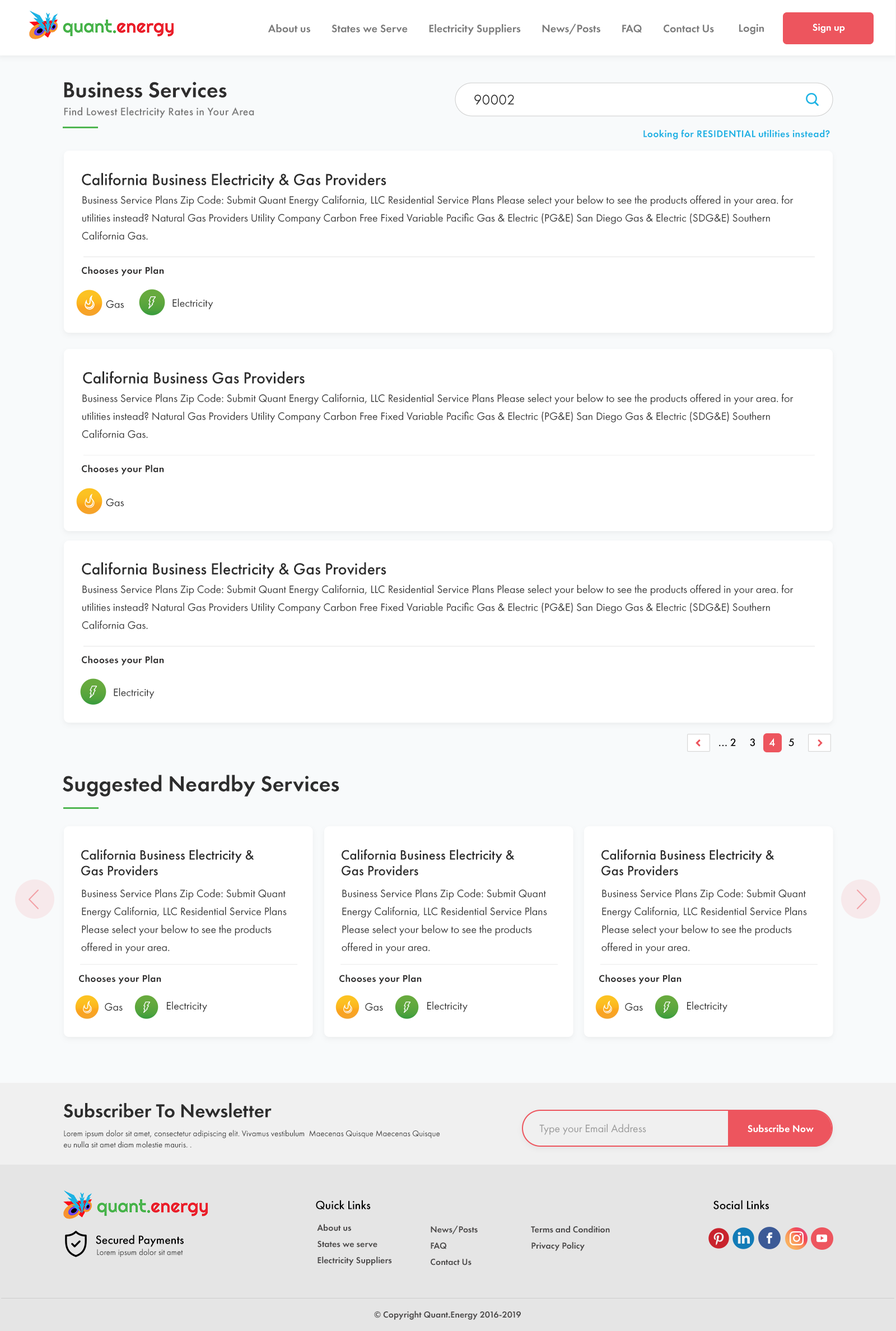
<style>
.page{position:relative;width:896px;height:1331px;background:#ffffff}
.page>*{position:absolute;margin:0}
.t1{font:11.2px "FuturaPT-Demi";color:#7a7a7a}
.t2{font:11.2px "FuturaPT-Demi";color:#7b7b7b}
.t3{font:10.1px "FuturaPT-Demi";letter-spacing:0.005em;color:#ffffff}
.t4{font:22.4px "FuturaPT-Demi";color:#2e2d2d}
.t5{font:14.6px "FuturaPT-Book";color:#2d2d2d}
.t6{font:11.2px "FuturaPT-Medium";letter-spacing:0.02em;color:#787878}
.t7{font:10.1px "FuturaPT-Demi";letter-spacing:0.02em;color:#1eb2e4}
.t8{font:16.8px "FuturaPT-Medium";color:#2d2d2d}
.t9{font:11.2px/17.9px "FuturaPT-Book";color:#333333}
.t10{font:10.1px "FuturaPT-Demi";letter-spacing:0.02em;color:#2e2d2d}
.t11{font:11.2px "FuturaPT-Book";color:#2d2d2d}
.t12{font:11.2px "FuturaPT-Medium";color:#000000}
.t13{font:11.2px "FuturaPT-Medium";color:#ffffff}
.t14{font:22.4px "FuturaPT-Demi";color:#2d2d2d}
.t15{font:14px/15.7px "FuturaPT-Medium";color:#2d2d2d}
.t16{font:19.6px "FuturaPT-Demi";color:#2d2d2d}
.t17{font:8.4px/11.2px "FuturaPT-Book";color:#2d2d2d}
.t18{font:11.2px "FuturaPT-Book";color:#999999}
.t19{font:12.3px "FuturaPT-Medium";color:#000000}
.t20{font:9px/16.2px "FuturaPT-Demi";letter-spacing:0.005em;color:#4a4848}
.t21{font:9px/16.2px "FuturaPT-Demi";letter-spacing:0.005em;color:#4a4848;text-transform:uppercase}
.t22{font:8.4px "FuturaPT-Book";color:#2d2d2d}
.t23{font:9px "FuturaPT-Demi";letter-spacing:0.005em;color:#4a4848}
</style>
<div class="page">
<p class="t1" style="left:268px;top:24px;width:446px;height:11px">About us        States we Serve        Electricity Suppliers        News/Posts        FAQ        Contact Us</p>
<p class="t2" style="left:739px;top:24px;width:25px;height:11px">Login</p>
<p class="t3" style="left:813px;top:24px;width:32px;height:9px">Sign up</p>
<p class="t4" style="left:64px;top:82px;width:163px;height:16px">Business Services</p>
<p class="t5" style="left:474px;top:95px;width:40px;height:10px">90002</p>
<p class="t6" style="left:64px;top:107px;width:190px;height:11px">Find Lowest Electricity Rates in Your Area</p>
<p class="t7" style="left:644px;top:129px;width:186px;height:10px">Looking for RESIDENTIAL utilities instead?</p>
<p class="t8" style="left:82px;top:172px;width:304px;height:17px">California Business Electricity &amp; Gas Providers</p>
<p class="t9" style="left:82px;top:195px;width:712px;height:45px">Business Service Plans Zip Code: Submit Quant Energy California, LLC Residential Service Plans Please select your below to see the products offered in your area. for  utilities instead? Natural Gas Providers Utility Company Carbon Free Fixed Variable Pacific Gas &amp; Electric (PG&amp;E) San Diego Gas &amp; Electric (SDG&amp;E) Southern California Gas.</p>
<p class="t10" style="left:82px;top:266px;width:82px;height:10px">Chooses your Plan</p>
<p class="t11" style="left:106px;top:300px;width:18px;height:8px">Gas</p>
<p class="t11" style="left:172px;top:299px;width:41px;height:10px">Electricity</p>
<p class="t8" style="left:83px;top:371px;width:222px;height:13px">California Business Gas Providers</p>
<p class="t9" style="left:82px;top:393px;width:712px;height:45px">Business Service Plans Zip Code: Submit Quant Energy California, LLC Residential Service Plans Please select your below to see the products offered in your area. for  utilities instead? Natural Gas Providers Utility Company Carbon Free Fixed Variable Pacific Gas &amp; Electric (PG&amp;E) San Diego Gas &amp; Electric (SDG&amp;E) Southern California Gas.</p>
<p class="t10" style="left:82px;top:464px;width:82px;height:10px">Chooses your Plan</p>
<p class="t11" style="left:106px;top:498px;width:18px;height:8px">Gas</p>
<p class="t8" style="left:82px;top:562px;width:304px;height:17px">California Business Electricity &amp; Gas Providers</p>
<p class="t9" style="left:82px;top:584px;width:712px;height:45px">Business Service Plans Zip Code: Submit Quant Energy California, LLC Residential Service Plans Please select your below to see the products offered in your area. for  utilities instead? Natural Gas Providers Utility Company Carbon Free Fixed Variable Pacific Gas &amp; Electric (PG&amp;E) San Diego Gas &amp; Electric (SDG&amp;E) Southern California Gas.</p>
<p class="t10" style="left:82px;top:655px;width:82px;height:10px">Chooses your Plan</p>
<p class="t11" style="left:114px;top:688px;width:41px;height:10px">Electricity</p>
<p class="t12" style="left:719px;top:738px;width:75px;height:8px">... 2     3     <span class="t13">4 </span>    5</p>
<p class="t14" style="left:63px;top:775px;width:276px;height:21px">Suggested Neardby Services</p>
<p class="t15" style="left:81px;top:849px;width:173px;height:27px">California Business Electricity &amp; <br>Gas Providers</p>
<p class="t15" style="left:342px;top:849px;width:173px;height:27px">California Business Electricity &amp; <br>Gas Providers</p>
<p class="t15" style="left:602px;top:849px;width:173px;height:27px">California Business Electricity &amp; <br>Gas Providers</p>
<p class="t9" style="left:81px;top:889px;width:206px;height:64px">Business Service Plans Zip Code: Submit Quant Energy California, LLC Residential Service Plans Please select your below to see the products offered in your area.</p>
<p class="t9" style="left:342px;top:889px;width:205px;height:64px">Business Service Plans Zip Code: Submit Quant Energy California, LLC Residential Service Plans Please select your below to see the products offered in your area.</p>
<p class="t9" style="left:602px;top:889px;width:205px;height:64px">Business Service Plans Zip Code: Submit Quant Energy California, LLC Residential Service Plans Please select your below to see the products offered in your area.</p>
<p class="t10" style="left:79px;top:974px;width:82px;height:10px">Chooses your Plan</p>
<p class="t10" style="left:339px;top:974px;width:83px;height:10px">Chooses your Plan</p>
<p class="t10" style="left:599px;top:974px;width:83px;height:10px">Chooses your Plan</p>
<p class="t11" style="left:167px;top:1001px;width:40px;height:11px">Electricity</p>
<p class="t11" style="left:427px;top:1001px;width:41px;height:11px">Electricity</p>
<p class="t11" style="left:687px;top:1001px;width:41px;height:11px">Electricity</p>
<p class="t11" style="left:105px;top:1003px;width:18px;height:8px">Gas</p>
<p class="t11" style="left:365px;top:1003px;width:18px;height:8px">Gas</p>
<p class="t11" style="left:625px;top:1003px;width:18px;height:8px">Gas</p>
<p class="t16" style="left:63px;top:1103px;width:209px;height:14px">Subscriber To Newsletter</p>
<p class="t17" style="left:64px;top:1130px;width:376px;height:18px">Lorem ipsum dolor sit amet, consectetur adipiscing elit. Vivamus vestibulum  Maecenas Quisque Maecenas Quisque eu nulla sit amet diam molestie mauris. .</p>
<p class="t18" style="left:539px;top:1123px;width:107px;height:12px">Type your Email Address</p>
<p class="t3" style="left:748px;top:1124px;width:66px;height:8px">Subscribe Now</p>
<p class="t19" style="left:316px;top:1200px;width:55px;height:9px">Quick Links</p>
<p class="t19" style="left:714px;top:1200px;width:55px;height:9px">Social Links</p>
<p class="t20" style="left:317px;top:1224px;width:75px;height:41px">About us           <br>States we serve           <br>Electricity Suppliers</p>
<p class="t20" style="left:431px;top:1225px;width:47px;height:40px">News/Posts           <br><span class="t21">Faq </span>          <br>Contact Us</p>
<p class="t20" style="left:531px;top:1225px;width:79px;height:26px">Terms and Condition<br>Privacy Policy</p>
<p class="t19" style="left:96px;top:1234px;width:88px;height:13px">Secured Payments</p>
<p class="t22" style="left:97px;top:1248px;width:86px;height:9px">Lorem ipsum dolor sit amet</p>
<p class="t23" style="left:374px;top:1311px;width:147px;height:8px">© Copyright Quant.Energy 2016-2019</p>
</div>
